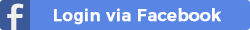
<style>
.page{position:relative;width:250px;height:30px;background:#5986e4}
.page>*{position:absolute;margin:0}
.t1{font:16.7px "Montserrat-Medium";color:#ffffff;font-weight:bold}
</style>
<div class="page">
<p class="t1" style="left:54px;top:8px;width:167px;height:17px">Login via Facebook</p>
</div>
